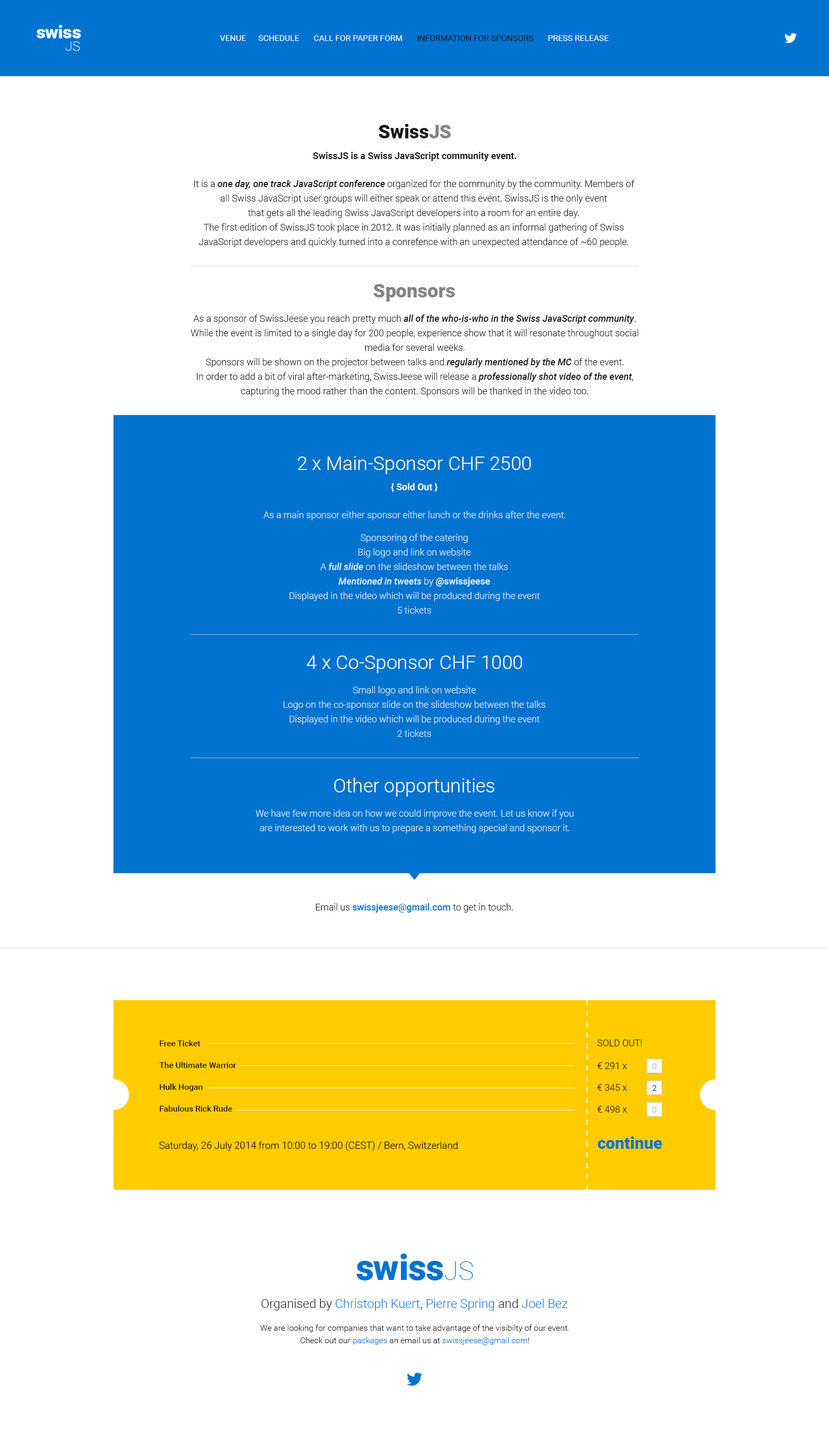
<style>
.page{position:relative;width:829px;height:1438px;background:#ffffff}
.page>*{position:absolute;margin:0}
.t1{font:17.9px "Roboto-Black";letter-spacing:-0.01em;color:#ffffff}
.t2{font:17.9px "Roboto-Black";letter-spacing:-0.02em;color:#ffffff}
.t3{font:17.9px "Roboto-Black";color:#ffffff}
.t4{font:13.2px "Roboto-Thin";color:#ffffff}
.t5{font:8.3px "Roboto-Regular";color:#ffffff;text-transform:uppercase}
.t6{font:8.3px "Roboto-Regular";color:#191919;text-transform:uppercase}
.t7{font:19.2px "Roboto-Black";color:#191919}
.t8{font:19.2px "Roboto-Black";color:#848484}
.t9{font:9.3px "Roboto-Bold";color:#191919}
.t10{font:9.3px/14.5px "Roboto-Light";color:#191919}
.t11{font:9.3px/14.5px "Roboto-MediumItalic";color:#191919}
.t12{font:19.2px "Roboto-Light";color:#ffffff}
.t13{font:9.3px "Roboto-Bold";color:#ffffff}
.t14{font:9.3px "Roboto-Light";color:#dceefc}
.t15{font:9.3px/14.5px "Roboto-Light";color:#dceefc}
.t16{font:9.3px/14.5px "Roboto-MediumItalic";color:#dceefc}
.t17{font:9.3px/14.5px "Roboto-Bold";color:#dceefc}
.t18{font:9.3px "Roboto-Medium";color:#0073d0}
.t19{font:9.3px "Roboto-Light";color:#191919}
.t20{font:8.3px/21.8px "Roboto-Medium";color:#191919}
.t21{font:9.3px "Roboto-Light";color:#191919;text-transform:uppercase}
.t22{font:9.3px/21.8px "Roboto-Light";color:#191919}
.t23{font:8.3px "Roboto-Light";color:#a9afb3}
.t24{font:8.3px "Roboto-Light";color:#191919}
.t25{font:9.8px "Roboto-Light";color:#000000}
.t26{font:16.6px "Roboto-Black";color:#0074d0}
.t27{font:35.4px "Roboto-Black";letter-spacing:-0.01em;color:#0073d0}
.t28{font:35.4px "Roboto-Black";letter-spacing:-0.02em;color:#0073d0}
.t29{font:35.4px "Roboto-Black";color:#0073d0}
.t30{font:26.1px "Roboto-Thin";color:#0073d0}
.t31{font:12.4px "Roboto-Light";color:#0073d0}
.t32{font:12.4px "Roboto-Light";color:#191919}
.t33{font:8.3px/12.4px "Roboto-Light";color:#191919}
.t34{font:8.3px/12.4px "Roboto-Light";color:#0073d0}
</style>
<div class="page">
<p class="t1" style="left:36px;top:25px;width:45px;height:13px"><span class="t2">s</span><span class="t3">w</span>is<span class="t3">s</span></p>
<p class="t4" style="left:65px;top:41px;width:15px;height:10px">JS</p>
<p class="t5" style="left:220px;top:35px;width:389px;height:6px">Venue      Schedule       Call for paper form      <span class="t6"> Information for sponsors</span>       Press release</p>
<p class="t7" style="left:379px;top:124px;width:72px;height:14px">Swiss<span class="t8">JS</span></p>
<p class="t9" style="left:313px;top:152px;width:204px;height:9px">SwissJS is a Swiss JavaScript community event.</p>
<p class="t10" style="left:194px;top:180px;width:441px;height:67px;text-align:center">It is a <span class="t11">one day, one track JavaScript conference</span> organized for the community by the community. Members of<br>all Swiss JavaScript user groups will either speak or attend this event. SwissJS is the only event<br>that gets all the leading Swiss JavaScript developers into a room for an entire day.<br>The first edition of SwissJS took place in 2012. It was initially planned as an informal gathering of Swiss<br>JavaScript developers and quickly turned into a conrefence with an unexpected attendance of ~60 people.</p>
<p class="t8" style="left:374px;top:284px;width:81px;height:18px">Sponsors</p>
<p class="t10" style="left:191px;top:315px;width:447px;height:81px;text-align:center">As a sponsor of SwissJeese you reach pretty much <span class="t11">all of the who-is-who in the Swiss JavaScript community</span>.<br>While the event is limited to a single day for 200 people, experience show that it will resonate throughout social<br>media for several weeks.<br>Sponsors will be shown on the projector between talks and <span class="t11">regularly mentioned by the MC</span> of the event.<br>In order to add a bit of viral after-marketing, SwissJeese will release a <span class="t11">professionally shot video of the event</span>,<br>capturing the mood rather than the content. Sponsors will be thanked in the video too.</p>
<p class="t12" style="left:297px;top:456px;width:234px;height:18px">2 x Main-Sponsor CHF 2500</p>
<p class="t13" style="left:391px;top:483px;width:47px;height:9px">{ Sold Out }</p>
<p class="t14" style="left:263px;top:511px;width:303px;height:9px">As a main sponsor either sponsor either lunch or the drinks after the event.</p>
<p class="t15" style="left:290px;top:534px;width:250px;height:80px;text-align:center">Sponsoring of the catering<br>Big logo and link on website<br>A <span class="t16">full slide</span> on the slideshow between the talks<br><span class="t16">Mentioned in tweets</span> by <span class="t17">@swissjeese<br></span>Displayed in the video which will be produced during the event<br>5 tickets</p>
<p class="t12" style="left:307px;top:656px;width:215px;height:17px">4 x Co-Sponsor CHF 1000</p>
<p class="t15" style="left:283px;top:686px;width:263px;height:51px;text-align:center">Small logo and link on website<br>Logo on the co-sponsor slide on the slideshow between the talks<br>Displayed in the video which will be produced during the event<br>2 tickets</p>
<p class="t12" style="left:334px;top:778px;width:160px;height:19px">Other opportunities</p>
<p class="t15" style="left:255px;top:809px;width:319px;height:24px;text-align:center">We have few more idea on how we could improve the event. Let us know if you<br>are interested to work with us to prepare a something special and sponsor it.</p>
<p class="t18" style="left:316px;top:903px;width:197px;height:10px"><span class="t19">Email us </span>swissjeese@gmail.com<span class="t19"> to get in touch.</span></p>
<p class="t20" style="left:159px;top:1040px;width:77px;height:72px">Free Ticket<br>The Ultimate Warrior<br>Hulk Hogan<br>Fabulous Rick Rude</p>
<p class="t21" style="left:598px;top:1040px;width:44px;height:6px">Sold out!</p>
<p class="t22" style="left:598px;top:1062px;width:29px;height:51px">€ 291 x<br>€ 345 x<br>€ 498 x</p>
<p class="t23" style="left:652px;top:1063px;width:5px;height:6px">0</p>
<p class="t24" style="left:652px;top:1085px;width:5px;height:6px">2</p>
<p class="t23" style="left:652px;top:1107px;width:5px;height:6px">0</p>
<p class="t25" style="left:159px;top:1141px;width:299px;height:10px">Saturday, 26 July 2014 from 10:00 to 19:00 (CEST) / Bern, Switzerland</p>
<p class="t26" style="left:598px;top:1136px;width:64px;height:13px">continue</p>
<p class="t27" style="left:357px;top:1254px;width:86px;height:27px"><span class="t28">s</span><span class="t29">w</span>is<span class="t29">s</span></p>
<p class="t30" style="left:445px;top:1261px;width:28px;height:19px">JS</p>
<p class="t31" style="left:261px;top:1299px;width:307px;height:12px"><span class="t32">Organised by </span>Christoph Kuert<span class="t32">, </span>Pierre Spring<span class="t32"> and </span>Joel Bez</p>
<p class="t33" style="left:260px;top:1325px;width:309px;height:20px;text-align:center">We are looking for companies that want to take advantage of the visibilty of our event.<br>Check out our <span class="t34">packages</span> an email us at <span class="t34">swissjeese@gmail.com</span>!</p>
</div>
